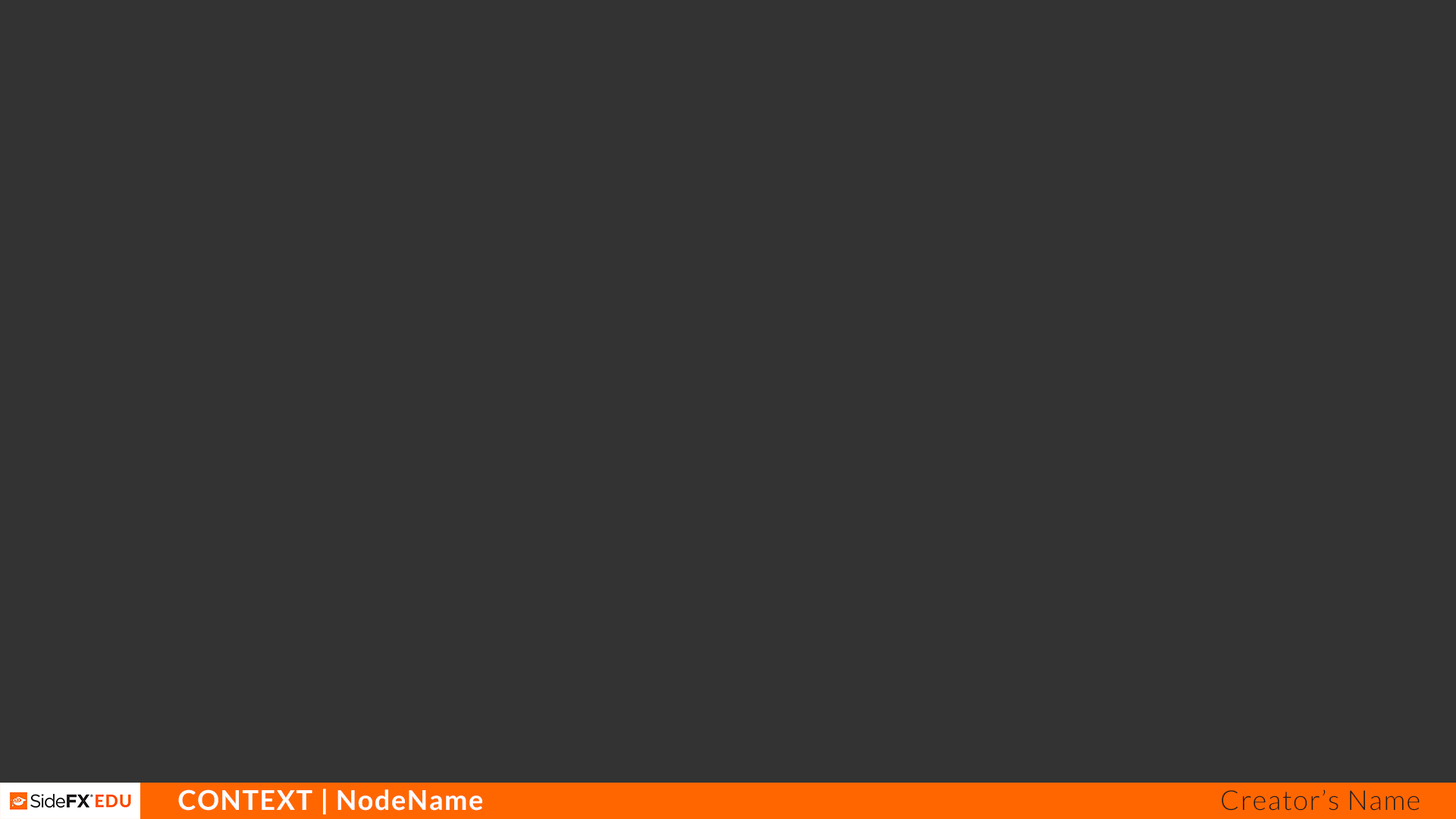
<style>
.page{position:relative;width:1456px;height:819px;background:#333333}
.page>*{position:absolute;margin:0}
.t1{font:27.3px "Lato-Bold";letter-spacing:0.044em;color:#fdfdff}
.t2{font:27.3px "Lato-Light";letter-spacing:0.044em;color:#231f20}
</style>
<div class="page">
<p class="t1" style="left:178px;top:789px;width:304px;height:25px">CONTEXT | NodeName</p>
<p class="t2" style="left:1222px;top:789px;width:198px;height:22px">Creator’s Name</p>
</div>
